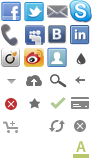
<style>
.page{position:relative;width:92px;height:161px;background:#ffffff}
.page>*{position:absolute;margin:0}
.t1{font:16px "MyriadPro-Semibold";color:#b7c86a}
</style>
<div class="page">
<p class="t1" style="left:76px;top:141px;width:10px;height:11px">A</p>
</div>
